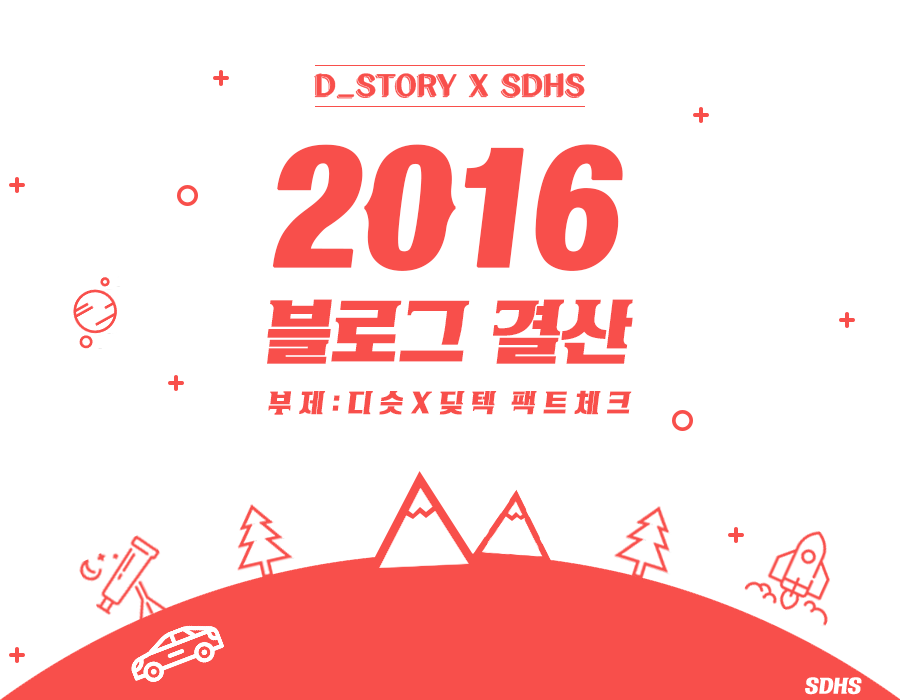
<style>
.page{position:relative;width:900px;height:700px;background:#ffffff}
.page>*{position:absolute;margin:0}
.t1{font:30.4px "KoreanKRSMB-R";color:#f84f4b}
.t2{font:131px "KoreanTIMS-R";color:#f84f4b;font-weight:bold}
.t3{font:69.2px "KoreanTIMS-R";color:#f84f4b}
.t4{font:24.9px "KoreanTIMS-R";color:#f84f4b}
</style>
<div class="page">
<p class="t1" style="left:314px;top:73px;width:271px;height:26px">D_STORY X SDHS</p>
<p class="t2" style="left:272px;top:144px;width:351px;height:127px">2016</p>
<p class="t3" style="left:267px;top:299px;width:366px;height:65px">블로그 결산</p>
<p class="t4" style="left:268px;top:390px;width:364px;height:25px">부 제 : 디 슷 X 딪 텍  팩 트 체 크</p>
</div>
